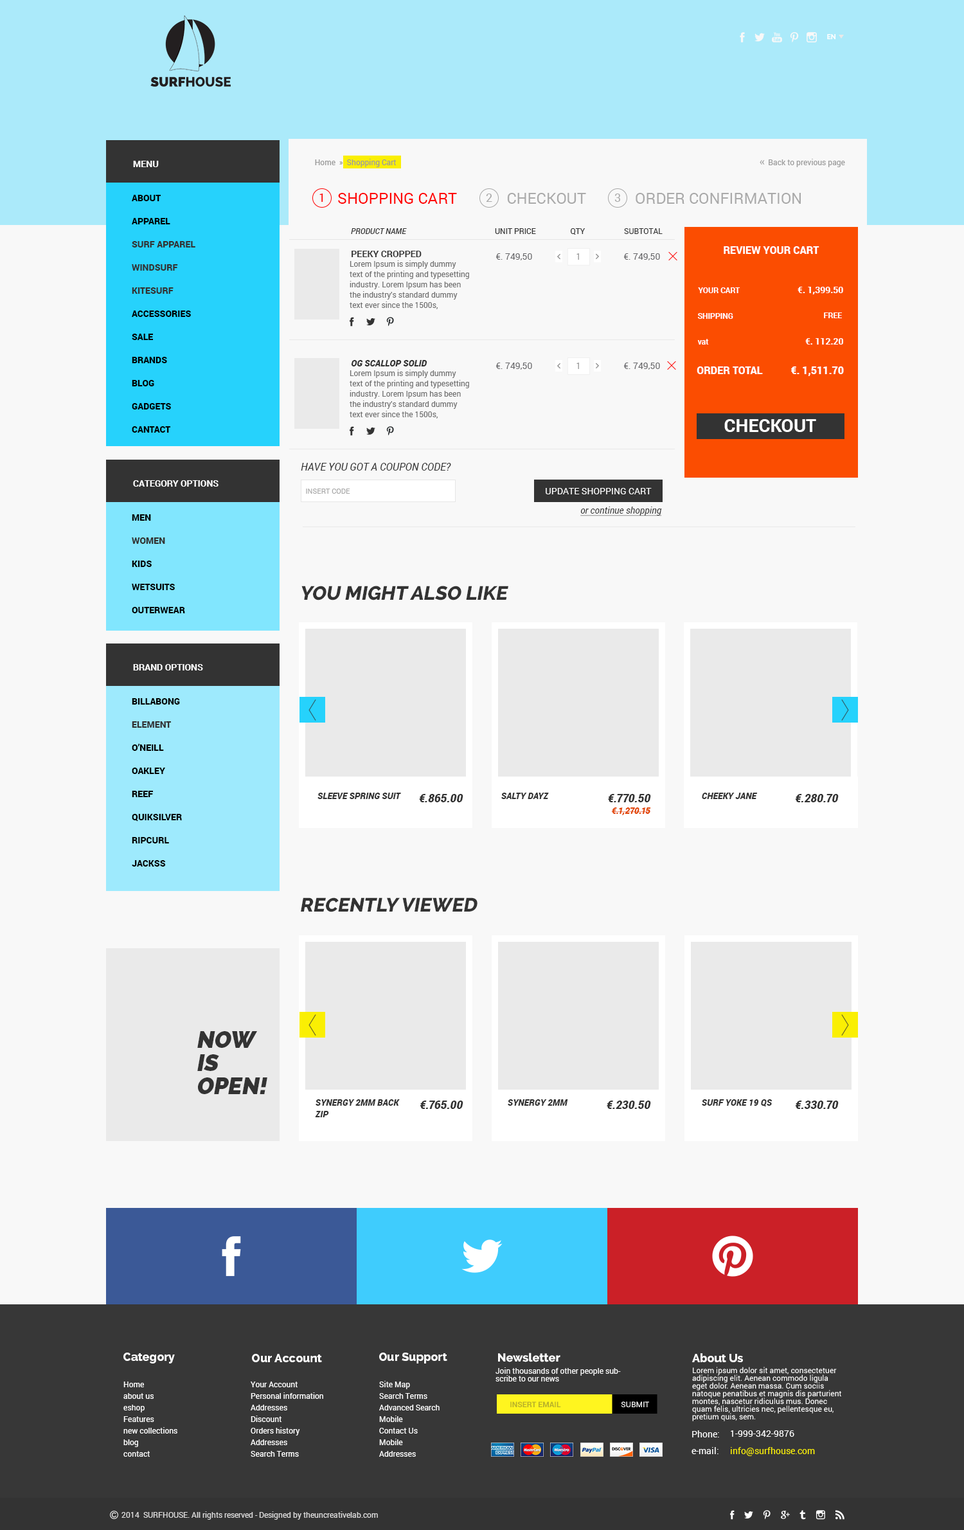
<style>
.page{position:relative;width:964px;height:1530px;background:#f8f8f8}
.page>*{position:absolute;margin:0}
.t1{font:6.4px "Raleway-Bold";letter-spacing:0.025em;color:#ffffff}
.t2{font:9px "Roboto-Bold";color:#ffffff;text-transform:uppercase}
.t3{font:7.7px "Roboto-Regular";color:#989898}
.t4{font:7.7px "Roboto-Regular";color:#999999}
.t5{font:9px/23.1px "Roboto-Black";color:#000000;text-transform:uppercase}
.t6{font:9px/23.1px "Roboto-Black";color:#333333;text-transform:uppercase}
.t7{font:11.6px "Roboto-Regular";color:#ff0000}
.t8{font:15.4px "Roboto-Regular";color:#ff0101;text-transform:uppercase}
.t9{font:11.6px "Roboto-Regular";color:#aaaaaa}
.t10{font:15.4px "Roboto-Regular";color:#aaaaaa;text-transform:uppercase}
.t11{font:7.7px "Roboto-MediumItalic";color:#333333}
.t12{font:7.7px "Roboto-Regular";color:#333333}
.t13{font:9px "Roboto-Bold";color:#353535;text-transform:uppercase}
.t14{font:9px "Roboto-Regular";color:#666669}
.t15{font:9px "Roboto-Regular";color:#9b9b9b;text-transform:uppercase}
.t16{font:10.3px "Roboto-Black";color:#fffefe}
.t17{font:7.7px/10.3px "Roboto-Regular";color:#707070}
.t18{font:7.7px "Roboto-Bold";color:#ffffff}
.t19{font:9px "Roboto-Bold";color:#ffffff}
.t20{font:9px "Roboto-BlackItalic";color:#333333}
.t21{font:10.3px "Roboto-Black";color:#ffffff}
.t22{font:18px "Roboto-Bold";color:#ffffff;text-transform:uppercase}
.t23{font:10.3px "Roboto-Italic";color:#333333}
.t24{font:7.1px "Roboto-Regular";color:#a8a8a8;text-transform:uppercase}
.t25{font:9px "Roboto-Regular";color:#ffffff;text-transform:uppercase}
.t26{font:9px "Roboto-Italic";color:#333333;text-decoration:underline}
.t27{font:19.3px "Raleway-ExtraBold";color:#333333;text-transform:uppercase;font-style:italic}
.t28{font:11.6px "Roboto-BlackItalic";color:#333333}
.t29{font:9px "Roboto-BlackItalic";color:#e24602}
.t30{font:23.1px/23.1px "Raleway-Heavy";color:#333333;text-transform:uppercase;font-style:italic}
.t31{font:9px/11.6px "Roboto-BlackItalic";color:#333333}
.t32{font:11.6px "Raleway-ExtraBold";color:#ffffff}
.t33{font:7.7px/7.7px "Roboto-Regular";color:#f8f8f8}
.t34{font:7.7px/7.7px "Roboto-Regular";color:#ffffff}
.t35{font:7.7px/11.6px "Roboto-Regular";color:#ffffff}
.t36{font:7.7px "Roboto-Bold";color:#b6af29;text-transform:uppercase}
.t37{font:7.7px "Roboto-Regular";color:#ffffff;text-transform:uppercase}
.t38{font:9px "Roboto-Regular";color:#ffffff}
.t39{font:9px "Roboto-Regular";color:#faef03}
.t40{font:7.7px "Roboto-Regular";color:#dad9d9}
</style>
<div class="page">
<p class="t1" style="left:827px;top:34px;width:9px;height:5px">EN</p>
<p class="t2" style="left:133px;top:161px;width:26px;height:6px">Menu</p>
<p class="t3" style="left:315px;top:159px;width:81px;height:8px">Home  »  Shopping Cart</p>
<p class="t4" style="left:769px;top:159px;width:76px;height:8px">Back to previous page</p>
<p class="t5" style="left:132px;top:195px;width:63px;height:238px">About<br>apparel<br><span class="t6">surf apparel          <br>windsurf       <br>kitesurf<br></span>accessories<br>sale<br>brands<br>blog<br>Gadgets<br>cantact<br>Electronic Gadgets</p>
<p class="t7" style="left:320px;top:194px;width:3px;height:8px">1</p>
<p class="t8" style="left:338px;top:193px;width:119px;height:11px">Shopping Cart</p>
<p class="t9" style="left:486px;top:194px;width:6px;height:8px">2</p>
<p class="t10" style="left:507px;top:193px;width:79px;height:11px">checkout</p>
<p class="t9" style="left:615px;top:194px;width:5px;height:8px">3</p>
<p class="t10" style="left:636px;top:193px;width:165px;height:11px">order confirmation</p>
<p class="t11" style="left:351px;top:228px;width:56px;height:6px">PRODUCT NAME</p>
<p class="t12" style="left:495px;top:228px;width:41px;height:6px">UNIT PRICE</p>
<p class="t12" style="left:571px;top:228px;width:15px;height:7px">QTY</p>
<p class="t12" style="left:624px;top:228px;width:39px;height:6px">SUBTOTAL</p>
<p class="t13" style="left:352px;top:251px;width:70px;height:6px">Peeky cropped</p>
<p class="t14" style="left:496px;top:253px;width:36px;height:7px">€. 749,50</p>
<p class="t15" style="left:577px;top:253px;width:2px;height:7px">1</p>
<p class="t14" style="left:624px;top:253px;width:36px;height:7px">€. 749,50</p>
<p class="t16" style="left:724px;top:246px;width:96px;height:8px">REVIEW YOUR CART</p>
<p class="t17" style="left:350px;top:260px;width:119px;height:49px">Lorem Ipsum is simply dummy text of the printing and typesetting industry. Lorem Ipsum has been the industry's standard dummy text ever since the 1500s,</p>
<p class="t18" style="left:698px;top:287px;width:43px;height:6px">YOUR CART</p>
<p class="t19" style="left:798px;top:287px;width:45px;height:7px">€. 1,399.50</p>
<p class="t18" style="left:698px;top:313px;width:36px;height:6px">SHIPPING</p>
<p class="t18" style="left:824px;top:312px;width:18px;height:6px">FREE</p>
<p class="t18" style="left:698px;top:339px;width:11px;height:6px">vat</p>
<p class="t19" style="left:806px;top:338px;width:37px;height:7px">€. 112.20</p>
<p class="t20" style="left:351px;top:360px;width:77px;height:6px">OG SCALLOP SOLID</p>
<p class="t14" style="left:496px;top:363px;width:36px;height:7px">€. 749,50</p>
<p class="t15" style="left:577px;top:363px;width:2px;height:6px">1</p>
<p class="t14" style="left:624px;top:363px;width:36px;height:7px">€. 749,50</p>
<p class="t17" style="left:350px;top:370px;width:119px;height:49px">Lorem Ipsum is simply dummy text of the printing and typesetting industry. Lorem Ipsum has been the industry's standard dummy text ever since the 1500s,</p>
<p class="t21" style="left:697px;top:366px;width:66px;height:8px">ORDER TOTAL</p>
<p class="t21" style="left:791px;top:366px;width:53px;height:10px">€. 1,511.70</p>
<p class="t22" style="left:724px;top:419px;width:92px;height:13px">checkout</p>
<p class="t23" style="left:301px;top:463px;width:150px;height:8px">HAVE YOU GOT A COUPON CODE?</p>
<p class="t2" style="left:133px;top:480px;width:86px;height:7px">category options</p>
<p class="t24" style="left:306px;top:489px;width:44px;height:5px">insert code</p>
<p class="t25" style="left:546px;top:488px;width:106px;height:6px">update shopping cart</p>
<p class="t26" style="left:580px;top:507px;width:82px;height:9px">or continue shopping</p>
<p class="t5" style="left:132px;top:514px;width:53px;height:99px">Men<br><span class="t6">women<br></span>kids <br>wetsuits<br>outerwear</p>
<p class="t27" style="left:302px;top:586px;width:207px;height:14px">YOU MIGHT ALSO LIKE</p>
<p class="t2" style="left:133px;top:664px;width:70px;height:6px">brand options</p>
<p class="t5" style="left:132px;top:698px;width:50px;height:169px">billabong<br><span class="t6">element<br></span>o’neill<br>oakley<br>reef<br>quiksilver<br>ripcurl<br>jackss</p>
<p class="t20" style="left:318px;top:793px;width:83px;height:6px">SLEEVE SPRING SUIT</p>
<p class="t28" style="left:419px;top:794px;width:45px;height:8px">€.865.00</p>
<p class="t20" style="left:501px;top:793px;width:48px;height:6px">SALTY DAYZ</p>
<p class="t28" style="left:608px;top:794px;width:43px;height:8px">€.770.50</p>
<p class="t20" style="left:702px;top:793px;width:56px;height:6px">CHEEKY JANE</p>
<p class="t28" style="left:795px;top:794px;width:44px;height:8px">€.280.70</p>
<p class="t29" style="left:611px;top:807px;width:40px;height:8px">€.1,270.15</p>
<p class="t27" style="left:301px;top:897px;width:177px;height:15px">RECENTLY VIEWED</p>
<p class="t30" style="left:197px;top:1031px;width:70px;height:63px">Now<br>is<br>open!</p>
<p class="t31" style="left:315px;top:1099px;width:85px;height:18px">SYNERGY 2MM BACK ZIP</p>
<p class="t28" style="left:420px;top:1101px;width:44px;height:8px">€.765.00</p>
<p class="t20" style="left:508px;top:1099px;width:60px;height:7px">SYNERGY 2MM BACK ZI</p>
<p class="t28" style="left:607px;top:1101px;width:44px;height:8px">€.230.50</p>
<p class="t20" style="left:702px;top:1099px;width:70px;height:8px">SURF YOKE 19 QS</p>
<p class="t28" style="left:795px;top:1101px;width:44px;height:8px">€.330.70</p>
<p class="t32" style="left:123px;top:1353px;width:52px;height:11px">Category</p>
<p class="t32" style="left:252px;top:1354px;width:70px;height:8px">Our Account</p>
<p class="t32" style="left:379px;top:1353px;width:68px;height:11px">Our Support</p>
<p class="t32" style="left:498px;top:1353px;width:63px;height:9px">Newsletter</p>
<p class="t32" style="left:692px;top:1353px;width:51px;height:9px">About Us</p>
<p class="t33" style="left:496px;top:1367px;width:125px;height:15px">Join thousands of other people subscribe to our news</p>
<p class="t34" style="left:692px;top:1367px;width:150px;height:54px">Lorem ipsum dolor sit amet, consectetuer adipiscing elit. Aenean commodo ligula eget dolor. Aenean massa. Cum sociis natoque penatibus et magnis dis parturient montes, nascetur ridiculus mus. Donec quam felis, ultricies nec, pellentesque eu, pretium quis, sem.</p>
<p class="t35" style="left:123px;top:1382px;width:54px;height:75px">Home<br>about us<br>eshop<br>Features<br>new collections<br>blog<br>contact</p>
<p class="t35" style="left:251px;top:1382px;width:72px;height:75px">Your Account<br>Personal information<br>Addresses<br>Discount<br>Orders history<br>Addresses<br>Search Terms</p>
<p class="t35" style="left:379px;top:1381px;width:61px;height:76px">Site Map<br>Search Terms<br>Advanced Search<br>Mobile<br>Contact Us<br>Mobile<br>Addresses</p>
<p class="t36" style="left:510px;top:1401px;width:51px;height:6px">insert email</p>
<p class="t37" style="left:621px;top:1401px;width:28px;height:6px">Submit</p>
<p class="t38" style="left:692px;top:1430px;width:27px;height:7px">Phone:</p>
<p class="t38" style="left:731px;top:1430px;width:64px;height:7px">1-999-342-9876</p>
<p class="t38" style="left:692px;top:1447px;width:27px;height:7px">e-mail:</p>
<p class="t39" style="left:731px;top:1447px;width:84px;height:9px">info@surfhouse.com</p>
<p class="t40" style="left:122px;top:1511px;width:256px;height:9px">2014  SURFHOUSE. All rights reserved - Designed by theuncreativelab.com</p>
</div>
